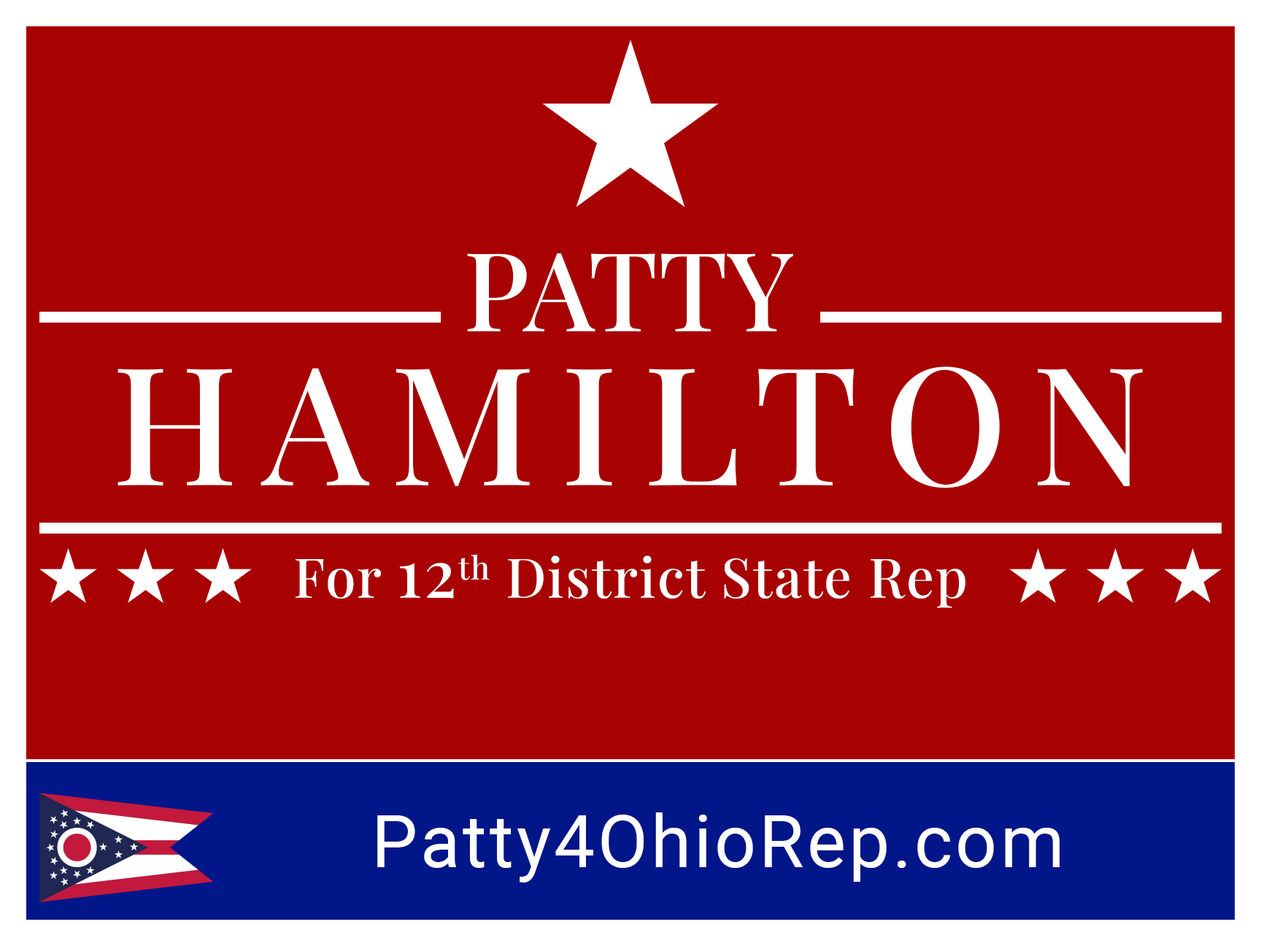
<style>
.page{position:relative;width:1261px;height:946px;background:#a80101}
.page>*{position:absolute;margin:0}
.t1{font:109.5px "PlayfairDisplayRoman-Medium";color:#ffffff}
.t2{font:164.2px "PlayfairDisplayRoman-Medium";letter-spacing:0.15em;color:#ffffff}
.t3{font:54.7px "PlayfairDisplayRoman-Medium";letter-spacing:0.03em;color:#ffffff}
.t4{font:65.7px "PlayfairDisplayRoman-Medium";letter-spacing:0.03em;color:#ffffff}
.t5{font:73px "Roboto-Regular";letter-spacing:0.04em;color:#ffffff}
</style>
<div class="page">
<p class="t1" style="left:467px;top:253px;width:326px;height:78px">PATTY</p>
<p class="t2" style="left:117px;top:366px;width:1026px;height:122px">HAMILTON</p>
<p class="t3" style="left:296px;top:554px;width:669px;height:54px">For <span class="t4">12</span>th District State Rep</p>
<p class="t5" style="left:377px;top:812px;width:683px;height:70px">Patty4OhioRep.com</p>
</div>
